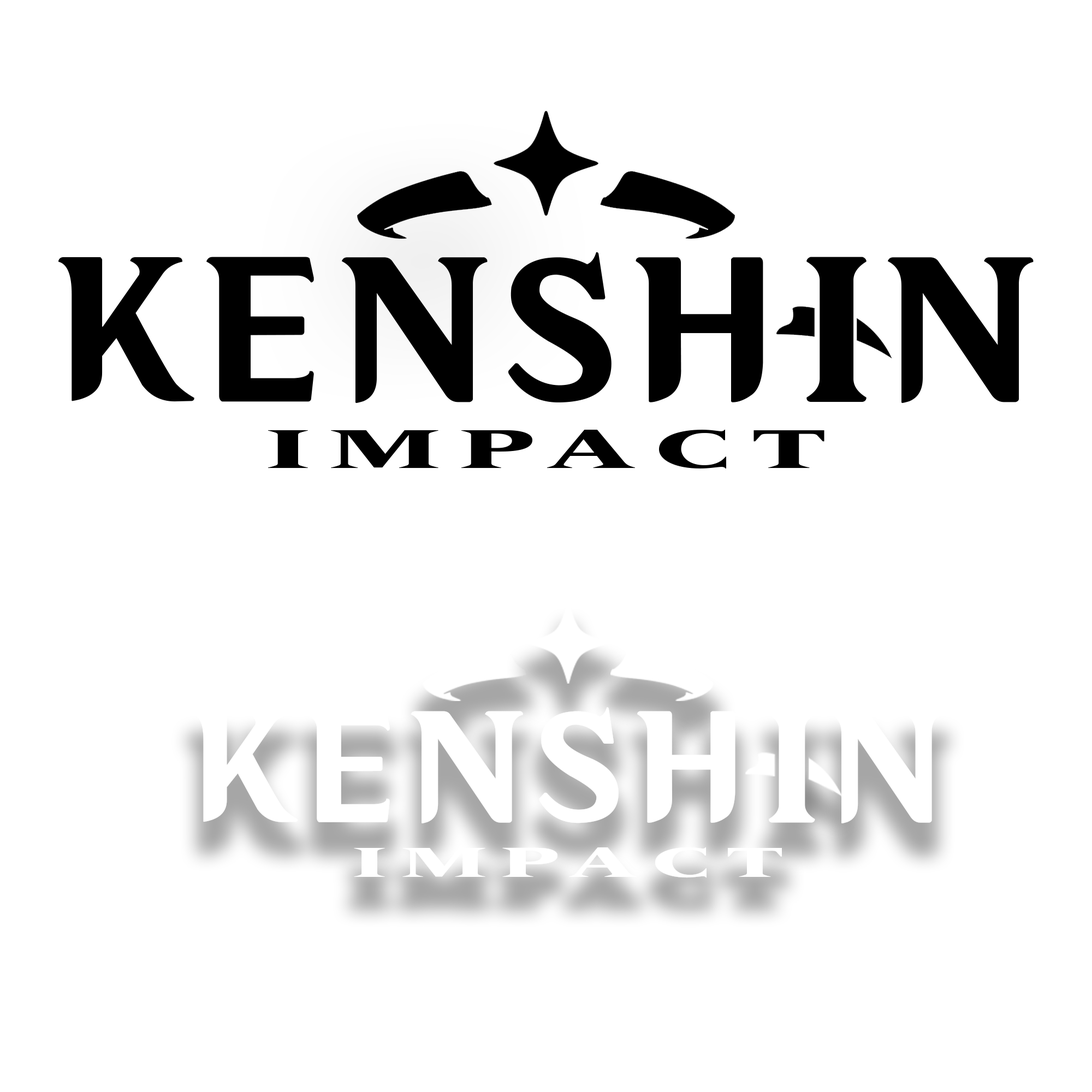
<style>
.page{position:relative;width:1092px;height:1092px;background:#ffffff}
.page>*{position:absolute;margin:0}
.t1{font:182px "HYWenHei-HEW";letter-spacing:0.05em;color:#000000}
.t2{font:53.1px "VersaillesLTStd-Black";letter-spacing:0.2em;color:#000000;scale:1.86 1}
.t3{font:140px "HYWenHei-HEW";letter-spacing:0.05em;color:#ffffff}
.t4{font:40.8px "VersaillesLTStd-Black";letter-spacing:0.2em;color:#ffffff;scale:1.86 1}
</style>
<div class="page">
<p class="t1" style="left:58px;top:252px;width:976px;height:151px">KENSHIN</p>
<p class="t2" style="left:268px;top:430px;width:556px;height:38px">IMPACT</p>
<p class="t3" style="left:193px;top:707px;width:750px;height:116px">KENSHIN</p>
<p class="t4" style="left:354px;top:847px;width:428px;height:31px">IMPACT</p>
</div>
